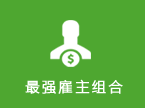
<style>
.page{position:relative;width:145px;height:108px;background:#4ea730}
.page>*{position:absolute;margin:0}
.t1{font:18px "PingHei-Light";letter-spacing:0.05em;color:#ffffff;font-weight:bold}
</style>
<div class="page">
<p class="t1" style="left:25px;top:79px;width:98px;height:15px">最强雇主组合</p>
</div>
